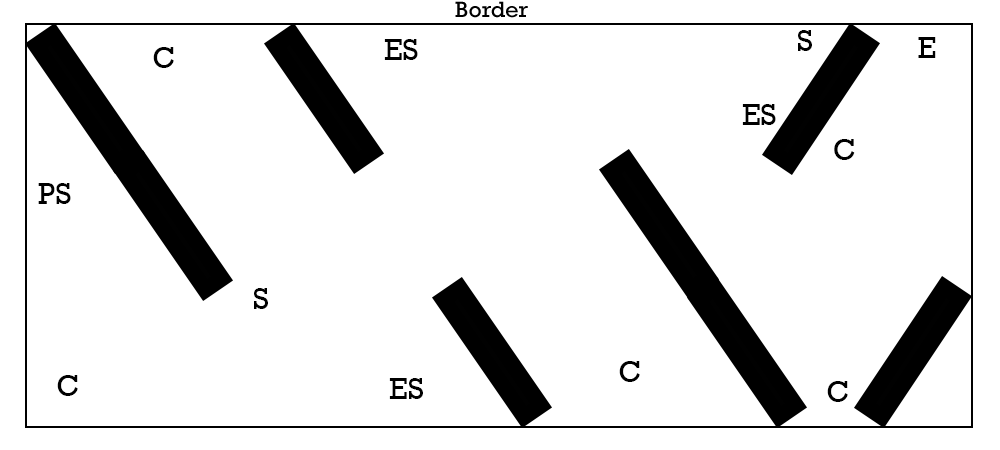
<style>
.page{position:relative;width:1000px;height:450px;background:#ffffff}
.page>*{position:absolute;margin:0}
.t1{font:30px "Rockwell";color:#000000}
</style>
<div class="page">
<p class="t1" style="left:798px;top:30px;width:14px;height:21px">S</p>
<p class="t1" style="left:384px;top:39px;width:34px;height:21px">ES</p>
<p class="t1" style="left:918px;top:37px;width:18px;height:21px">E</p>
<p class="t1" style="left:153px;top:47px;width:21px;height:21px">C</p>
<p class="t1" style="left:742px;top:104px;width:34px;height:21px">ES</p>
<p class="t1" style="left:834px;top:139px;width:21px;height:21px">C</p>
<p class="t1" style="left:38px;top:183px;width:33px;height:21px">PS</p>
<p class="t1" style="left:254px;top:288px;width:14px;height:21px">S</p>
<p class="t1" style="left:619px;top:361px;width:21px;height:21px">C</p>
<p class="t1" style="left:57px;top:375px;width:21px;height:21px">C</p>
<p class="t1" style="left:389px;top:378px;width:34px;height:21px">ES</p>
<p class="t1" style="left:827px;top:381px;width:21px;height:21px">C</p>
</div>
